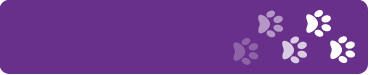
<style>
.page{position:relative;width:370px;height:75px;background:#682f8b}
.page>*{position:absolute;margin:0}
.t1{font:28.7px "storybook";color:#b497c5;text-transform:uppercase}
.t2{font:28.7px "storybook";color:#ffffff;text-transform:uppercase}
.t3{font:28.7px "storybook";color:#8e63a8;text-transform:uppercase}
.t4{font:28.7px "storybook";color:#d9cbe2;text-transform:uppercase}
.t5{font:28.7px "storybook";color:#fefefe;text-transform:uppercase}
</style>
<div class="page">
<p class="t1" style="left:258px;top:10px;width:25px;height:28px;rotate:89deg">'</p>
<p class="t2" style="left:306px;top:10px;width:25px;height:27px;rotate:89deg">'</p>
<p class="t3" style="left:233px;top:38px;width:26px;height:27px;rotate:89deg">'</p>
<p class="t4" style="left:282px;top:36px;width:25px;height:28px;rotate:89deg">'</p>
<p class="t5" style="left:330px;top:36px;width:25px;height:27px;rotate:89deg">'</p>
</div>
